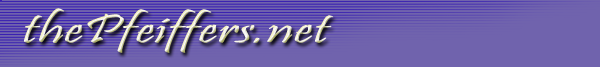
<style>
.page{position:relative;width:600px;height:67px;background:#7063ad}
.page>*{position:absolute;margin:0}
.t1{font:41.6px "Pristina-Regular";scale:1.56 1}
</style>
<div class="page">
<p class="t1" style="left:24px;top:8px;width:310px;height:45px">thePfeiffers.net</p>
</div>
